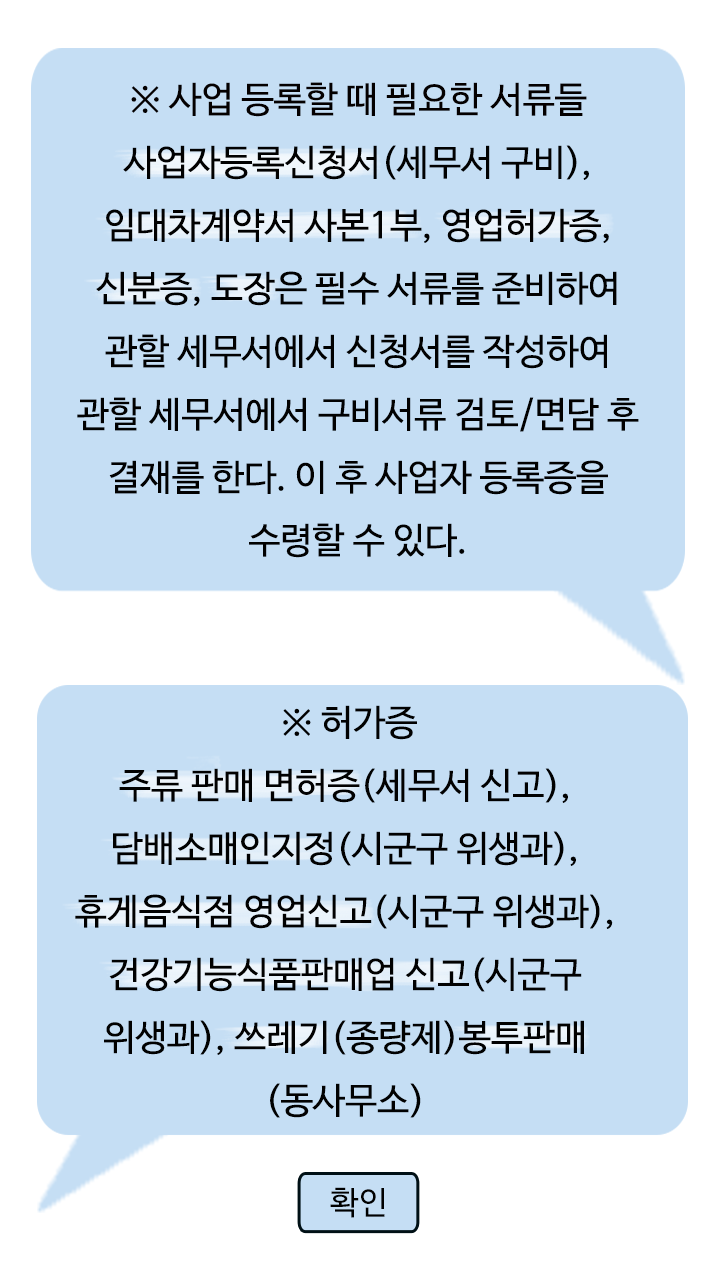
<style>
.page{position:relative;width:720px;height:1280px;background:#c5def4}
.page>*{position:absolute;margin:0}
.t1{font:36px "NanumBarunGothic";color:#010101}
.t2{font:36px "NanumBarunGothic";color:#040000}
.t3{font:32px "NanumBarunGothic";color:#000000}
</style>
<div class="page">
<p class="t1" style="left:77px;top:82px;width:562px;height:476px;text-align:center"><span class="t2">※ 사업 등록할 때 필요한 서류들<br></span>사업자등록신청서(세무서 구비), 임대차계약서 사본1부, 영업허가증, <br>신분증, 도장은 필수 서류를 준비하여 <br>관할 세무서에서 신청서를 작성하여 <br>관할 세무서에서 구비서류 검토/면담 후 결재를 한다. 이 후 사업자 등록증을 <br>수령할 수 있다.</p>
<p class="t1" style="left:75px;top:705px;width:538px;height:413px;text-align:center">※ 허가증<br>주류 판매 면허증(세무서 신고),  담배소매인지정(시군구 위생과),휴게음식점 영업신고(시군구 위생과), 건강기능식품판매업 신고(시군구 위생과), 쓰레기(종량제)봉투판매(동사무소)</p>
<p class="t3" style="left:330px;top:1187px;width:55px;height:31px">확인</p>
</div>
